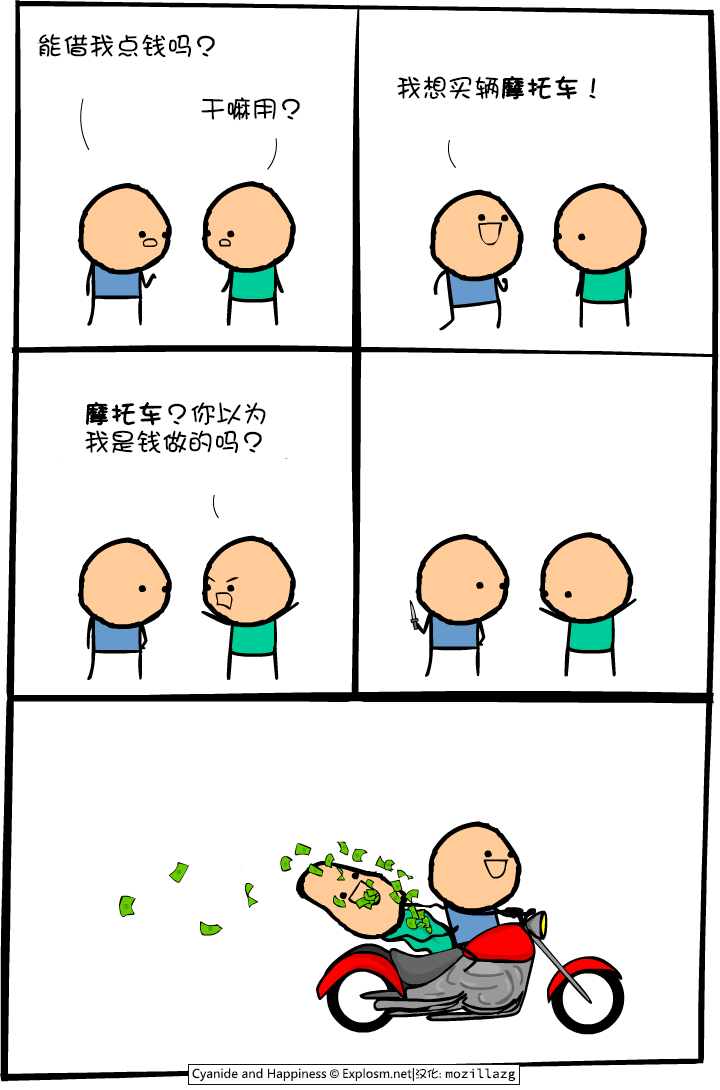
<style>
.page{position:relative;width:720px;height:1090px;background:#ffffff}
.page>*{position:absolute;margin:0}
.t1{font:26px "DFGirl";color:#000000}
.t2{font:26px "DFGirl";color:#000000;font-weight:bold}
.t3{font:26px/28px "DFGirl";color:#000000}
.t4{font:26px/28px "DFGirl";color:#000000;font-weight:bold}
</style>
<div class="page">
<p class="t1" style="left:39px;top:34px;width:176px;height:24px">能借我点钱吗？</p>
<p class="t1" style="left:397px;top:75px;width:199px;height:25px">我想买辆<span class="t2">摩托车</span>！</p>
<p class="t1" style="left:201px;top:97px;width:99px;height:24px">干嘛用？</p>
<p class="t3" style="left:85px;top:401px;width:181px;height:53px"><span class="t4">摩托车</span>？你以为<br>我是钱做的吗？</p>
</div>
